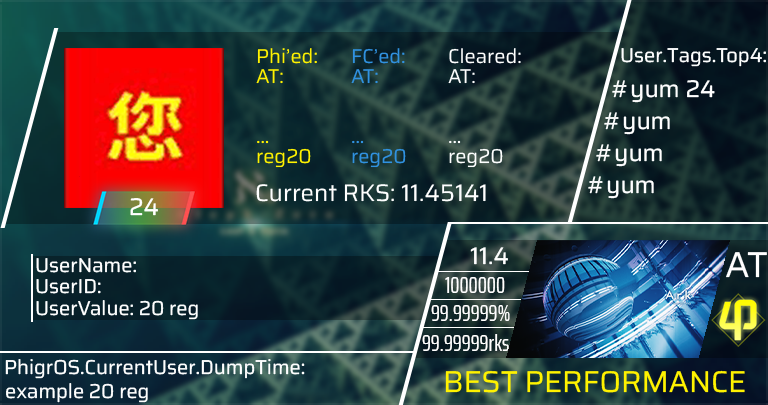
<style>
.page{position:relative;width:768px;height:405px}
.page>*{position:absolute;margin:0}
.t1{font:20px/20px "SairaRoman-Regular";color:#fff200}
.t2{font:20px/20px "SairaRoman-Regular";color:#3092e1}
.t3{font:20px/20px "SairaRoman-Regular";color:#ffffff}
.t4{font:20px "SairaRoman-Regular";color:#ffffff}
.t5{font:24px "SairaRoman-Regular";color:#ffffff}
.t6{font:36px "SairaRoman-Regular";color:#ffffff}
.t7{font:23px "SairaExtraCondensed-Regular";color:#ffffff}
.t8{font:30px "SairaRoman-Regular";color:#fff200}
</style>
<div class="page">
<p class="t1" style="left:256px;top:48px;width:61px;height:120px">Phi’ed:<br>AT:<br><br> <br>...<br>reg20</p>
<p class="t2" style="left:351px;top:48px;width:55px;height:120px">FC’ed:<br>AT:<br><br> <br>...<br>reg20</p>
<p class="t3" style="left:448px;top:48px;width:73px;height:120px">Cleared:<br>AT:<br><br> <br>...<br>reg20</p>
<p class="t4" style="left:621px;top:48px;width:145px;height:19px">User.Tags.Top4:</p>
<p class="t5" style="left:612px;top:80px;width:103px;height:23px">#yum 24</p>
<p class="t5" style="left:604px;top:112px;width:66px;height:23px">#yum</p>
<p class="t5" style="left:596px;top:144px;width:66px;height:23px">#yum</p>
<p class="t5" style="left:256px;top:184px;width:230px;height:18px">Current RKS: 11.45141</p>
<p class="t5" style="left:588px;top:176px;width:66px;height:23px">#yum</p>
<p class="t5" style="left:130px;top:198px;width:28px;height:18px">24</p>
<p class="t5" style="left:470px;top:247px;width:38px;height:18px">11.4</p>
<p class="t6" style="left:726px;top:252px;width:41px;height:26px">AT</p>
<p class="t4" style="left:36px;top:258px;width:100px;height:15px">UserName:</p>
<p class="t4" style="left:36px;top:279px;width:65px;height:15px">UserID:</p>
<p class="t7" style="left:445px;top:277px;width:60px;height:16px">1000000</p>
<p class="t4" style="left:36px;top:300px;width:162px;height:20px">UserValue: 20 reg</p>
<p class="t7" style="left:431px;top:305px;width:79px;height:16px">99.99999%</p>
<p class="t7" style="left:422px;top:334px;width:87px;height:17px">99.99999rks</p>
<p class="t4" style="left:5px;top:359px;width:300px;height:20px">PhigrOS.CurrentUser.DumpTime:</p>
<p class="t8" style="left:445px;top:370px;width:300px;height:23px">BEST PERFORMANCE</p>
<p class="t4" style="left:6px;top:383px;width:142px;height:20px">example 20 reg</p>
</div>
